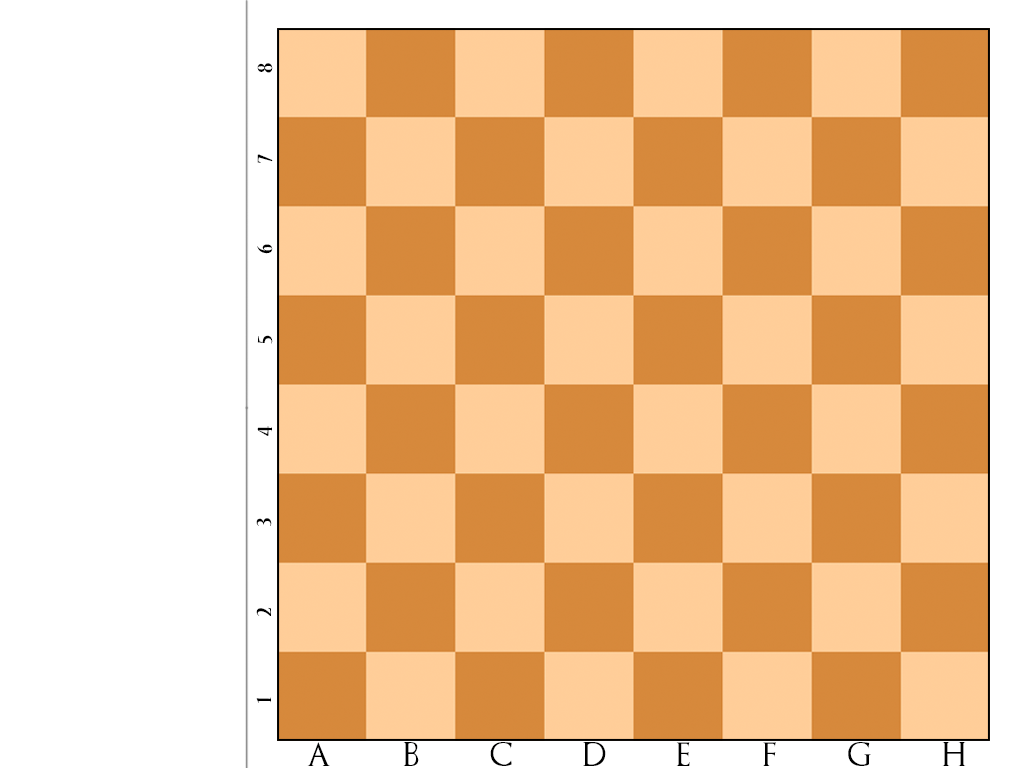
<style>
.page{position:relative;width:1024px;height:768px;background:#ffffff}
.page>*{position:absolute;margin:0}
.t1{font:24px "NuevaStd-BoldCond";letter-spacing:3.38em;color:#000000}
.t2{font:24px "GameofThrones";letter-spacing:2.98em;color:#000000}
</style>
<div class="page">
<p class="t1" style="left:256px;top:63px;width:17px;height:640px;rotate:-180deg">12345678</p>
<p class="t2" style="left:307px;top:742px;width:659px;height:24px">ABCDEFGH</p>
</div>
